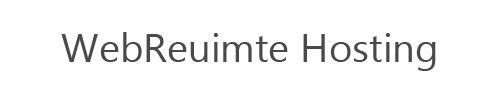
<style>
.page{position:relative;width:500px;height:100px;background:#ffffff}
.page>*{position:absolute;margin:0}
.t1{font:40px "Gadugi";color:#4a4a4a}
</style>
<div class="page">
<p class="t1" style="left:61px;top:32px;width:375px;height:39px">WebReuimte Hosting</p>
</div>
